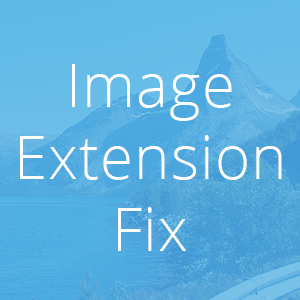
<style>
.page{position:relative;width:300px;height:300px}
.page>*{position:absolute;margin:0}
.t1{font:60px "OpenSans-Light";letter-spacing:0.02em;color:#ffffff}
</style>
<div class="page">
<p class="t1" style="left:20px;top:64px;width:262px;height:187px;text-align:center">Image<br>Extension Fix</p>
</div>
